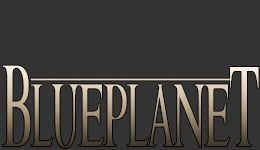
<style>
.page{position:relative;width:260px;height:150px;background:#333333}
.page>*{position:absolute;margin:0}
.t1{font:114.5px "Lion-kinG";scale:0.37 1}
</style>
<div class="page">
<p class="t1" style="left:3px;top:65px;width:256px;height:83px">BlueplaneT</p>
</div>
